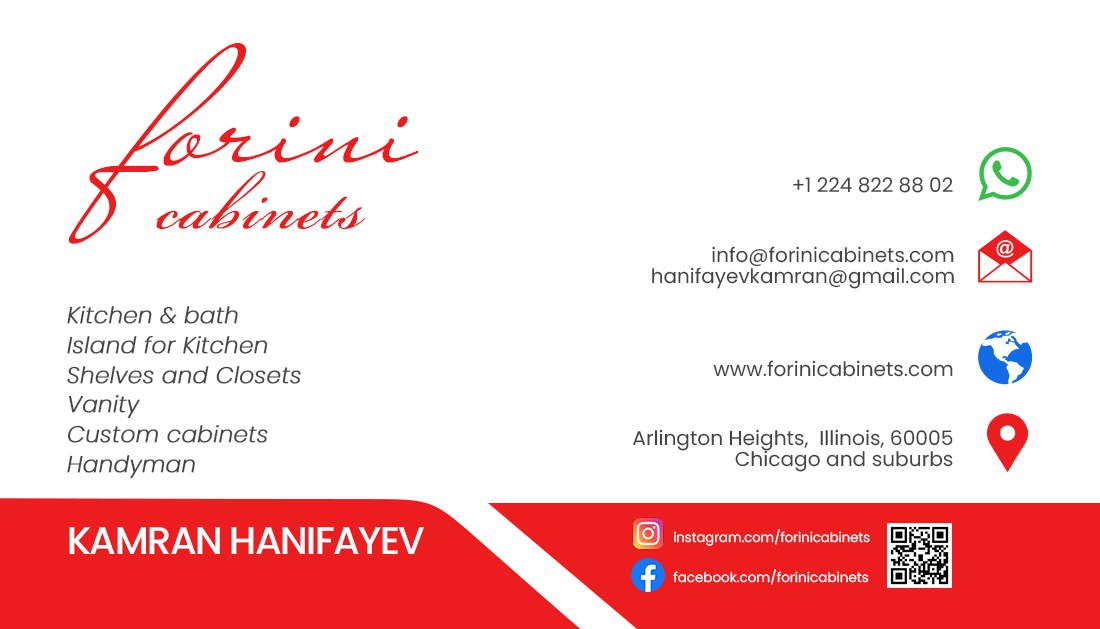
<style>
.page{position:relative;width:1100px;height:629px;background:#ffffff}
.page>*{position:absolute;margin:0}
.t1{font:168px "MissStanfort";color:#eb1d1e}
.t2{font:100px "BickhamScriptPro3";letter-spacing:0.02em;color:#eb1d1e}
.t3{font:20px "Poppins-Regular";color:#444444}
.t4{font:22.6px/29.9px "Poppins-ExtraLightItalic";color:#444444;font-weight:bold}
.t5{font:20px/21px "Poppins-Regular";color:#444444}
.t6{font:38.5px "Poppins-Medium";letter-spacing:-0.04em;color:#ffffff;text-transform:uppercase}
.t7{font:13.4px "Poppins-Regular";color:#ffffff}
</style>
<div class="page">
<p class="t1" style="left:68px;top:43px;width:351px;height:201px">forini</p>
<p class="t2" style="left:156px;top:171px;width:210px;height:58px">cabinets</p>
<p class="t3" style="left:793px;top:177px;width:160px;height:16px">+1 224 822 88 02</p>
<p class="t3" style="left:712px;top:246px;width:242px;height:21px">info@forinicabinets.com</p>
<p class="t3" style="left:652px;top:267px;width:302px;height:22px">hanifayevkamran@gmail.com</p>
<p class="t4" style="left:67px;top:306px;width:234px;height:173px">Kitchen &amp; bath<br>Island for Kitchen<br>Shelves and Closets<br>Vanity<br>Custom cabinets<br>Handyman</p>
<p class="t3" style="left:713px;top:360px;width:240px;height:17px">www.forinicabinets.com</p>
<p class="t5" style="left:633px;top:429px;width:320px;height:43px;text-align:right">Arlington Heights,  Illinois, 60005<br>Chicago and suburbs</p>
<p class="t6" style="left:69px;top:527px;width:355px;height:27px">Kamran Hanifayev</p>
<p class="t7" style="left:673px;top:529px;width:197px;height:17px">instagram.com/forinicabinets</p>
<p class="t7" style="left:673px;top:569px;width:196px;height:16px">facebook.com/forinicabinets</p>
</div>
